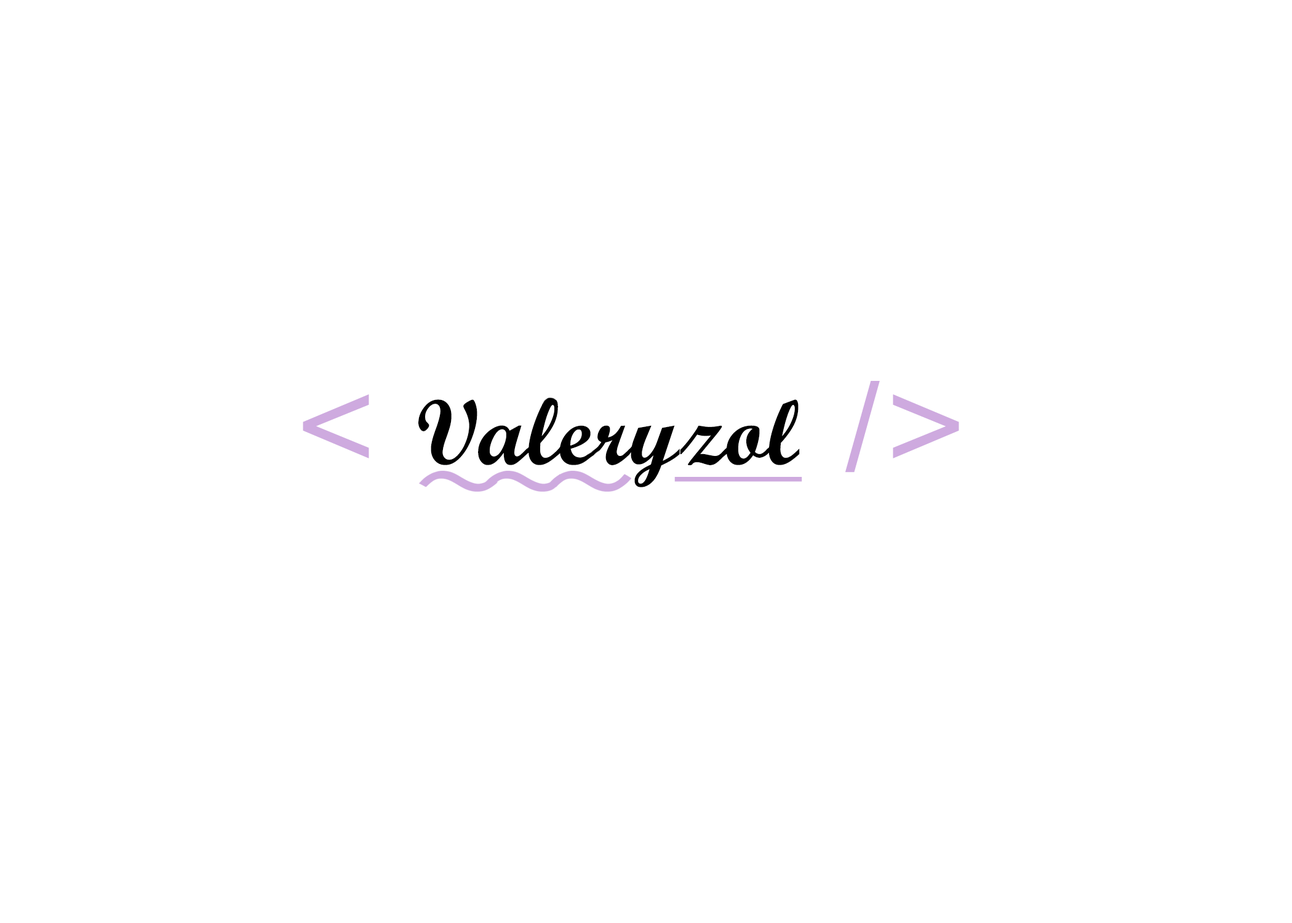
<style>
.page{position:relative;width:1292px;height:923px;background:#ffffff}
.page>*{position:absolute;margin:0}
.t1{font:92.3px "ScriptMTBold";letter-spacing:0.025em;color:#000000}
.t2{font:123.1px "BrushScriptMT";letter-spacing:0.025em;color:#ceaadf}
</style>
<div class="page">
<p class="t1" style="left:303px;top:381px;width:656px;height:106px"><span class="t2">&lt; </span>Valeryzol <span class="t2">/&gt;</span></p>
</div>
